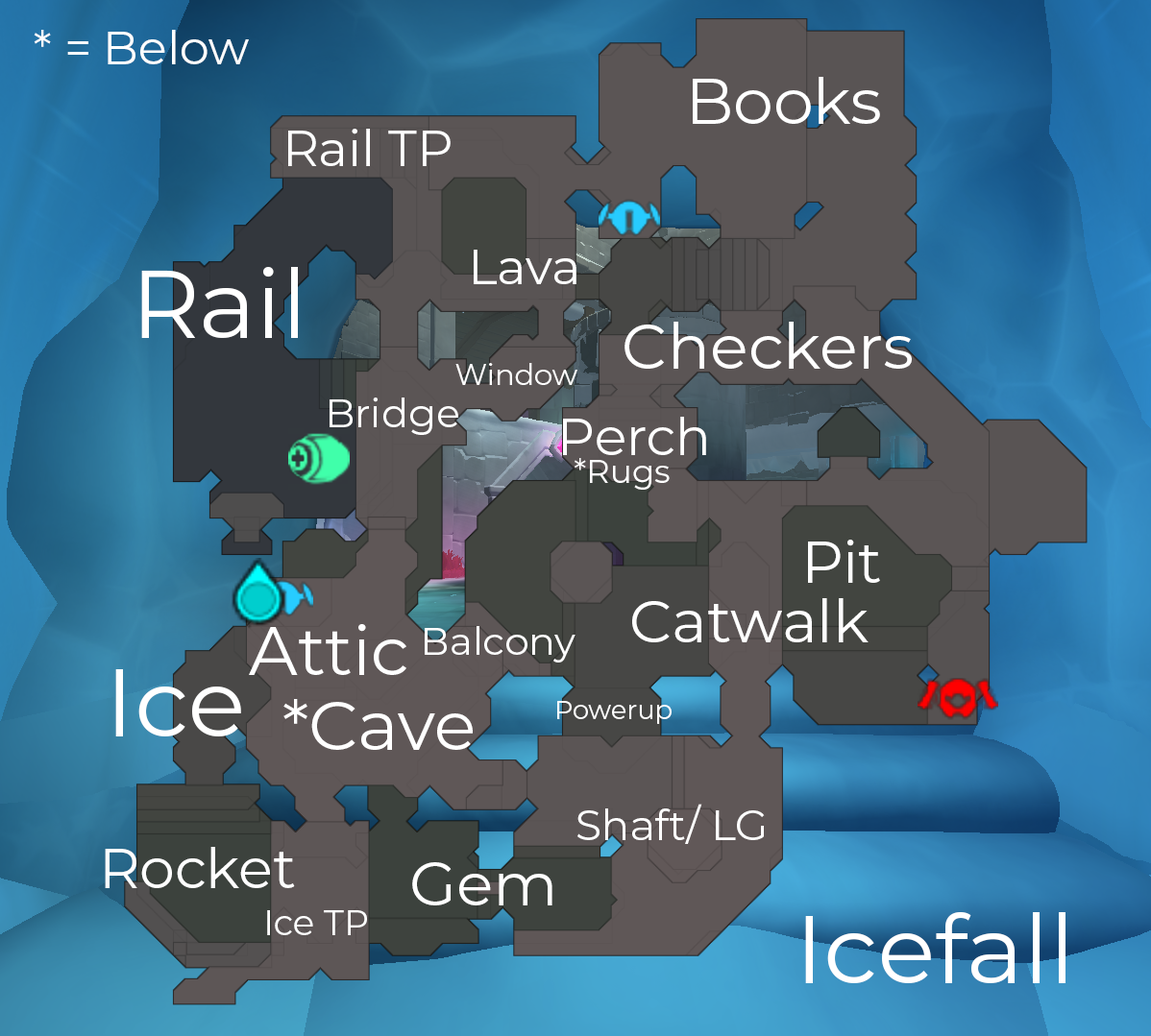
<style>
.page{position:relative;width:1151px;height:1036px}
.page>*{position:absolute;margin:0}
.t1{font:46.8px "Montserrat-Regular";color:#ffffff}
.t2{font:63.9px "Montserrat-Regular";color:#ffffff}
.t3{font:50.1px "Montserrat-Regular";color:#ffffff}
.t4{font:49.4px "Montserrat-Regular";color:#ffffff}
.t5{font:96px "Montserrat-Regular";color:#ffffff}
.t6{font:63px "Montserrat-Regular";color:#ffffff}
.t7{font:29.2px "Montserrat-Regular";color:#ffffff}
.t8{font:40.2px "Montserrat-Regular";color:#ffffff}
.t9{font:52.3px "Montserrat-Regular";color:#ffffff}
.t10{font:32.6px "Montserrat-Regular";color:#ffffff}
.t11{font:58.6px "Montserrat-Regular";color:#ffffff}
.t12{font:59.5px "Montserrat-Regular";color:#ffffff}
.t13{font:68.2px "Montserrat-Regular";color:#ffffff}
.t14{font:38.8px "Montserrat-Regular";color:#ffffff}
.t15{font:68.8px "Montserrat-Regular";color:#ffffff}
.t16{font:26px "Montserrat-Regular";color:#ffffff}
.t17{font:42.1px "Montserrat-Regular";color:#ffffff}
.t18{font:56.3px "Montserrat-Regular";color:#ffffff}
.t19{font:61.1px "Montserrat-Regular";color:#ffffff}
.t20{font:35px "Montserrat-Regular";color:#ffffff}
</style>
<div class="page">
<p class="t1" style="left:34px;top:30px;width:215px;height:34px">* = Below</p>
<p class="t2" style="left:692px;top:77px;width:188px;height:47px">Books</p>
<p class="t3" style="left:288px;top:129px;width:162px;height:37px">Rail TP</p>
<p class="t4" style="left:474px;top:250px;width:102px;height:34px">Lava</p>
<p class="t5" style="left:141px;top:267px;width:157px;height:71px">Rail</p>
<p class="t6" style="left:624px;top:322px;width:287px;height:47px">Checkers</p>
<p class="t7" style="left:455px;top:363px;width:122px;height:22px">Window</p>
<p class="t8" style="left:329px;top:398px;width:129px;height:37px">Bridge</p>
<p class="t9" style="left:563px;top:417px;width:143px;height:38px">Perch</p>
<p class="t10" style="left:574px;top:458px;width:95px;height:32px">*Rugs</p>
<p class="t11" style="left:808px;top:540px;width:72px;height:43px">Pit</p>
<p class="t12" style="left:632px;top:598px;width:236px;height:45px">Catwalk</p>
<p class="t13" style="left:249px;top:624px;width:157px;height:51px">Attic</p>
<p class="t14" style="left:425px;top:626px;width:150px;height:37px">Balcony</p>
<p class="t5" style="left:115px;top:669px;width:126px;height:68px">Ice</p>
<p class="t15" style="left:283px;top:699px;width:190px;height:51px">*Cave</p>
<p class="t16" style="left:557px;top:701px;width:114px;height:23px">Powerup</p>
<p class="t17" style="left:577px;top:804px;width:188px;height:40px">Shaft/ LG</p>
<p class="t18" style="left:105px;top:847px;width:190px;height:41px">Rocket</p>
<p class="t19" style="left:412px;top:862px;width:140px;height:44px">Gem</p>
<p class="t20" style="left:267px;top:911px;width:100px;height:24px">Ice TP</p>
<p class="t5" style="left:805px;top:912px;width:260px;height:72px">Icefall</p>
</div>
